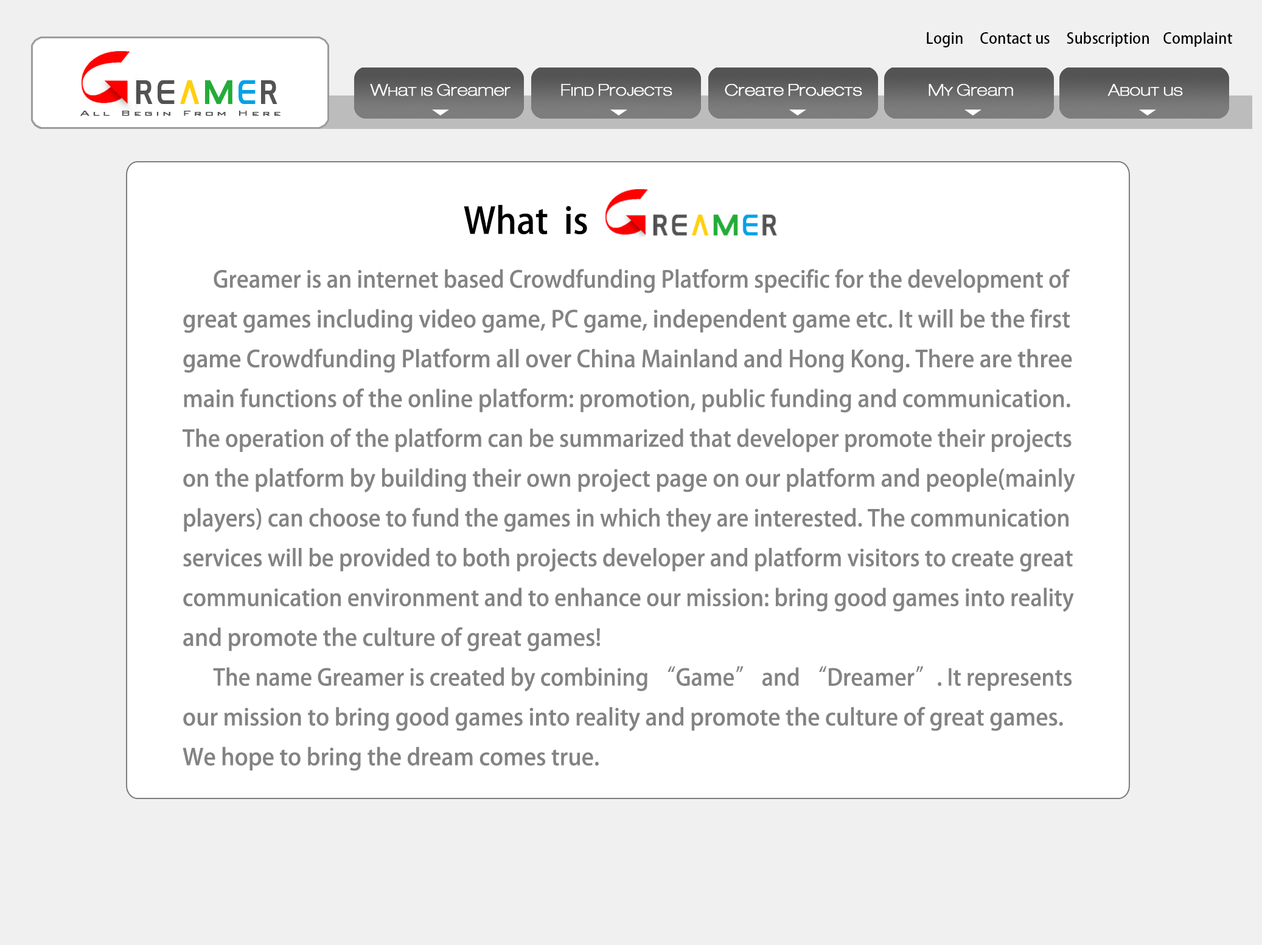
<style>
.page{position:relative;width:1262px;height:945px;background:#ffffff}
.page>*{position:absolute;margin:0}
.t1{font:14.6px "AdobeHeitiStd-Regular";color:#000000}
.t2{font:29.6px "GAMECUBENDualSet";letter-spacing:-0.01em;color:#535353}
.t3{font:29.6px "GAMECUBENDualSet";letter-spacing:-0.01em;color:#ffcf10}
.t4{font:29.6px "GAMECUBENDualSet";letter-spacing:-0.01em;color:#22ac38}
.t5{font:29.6px "GAMECUBENDualSet";letter-spacing:-0.01em;color:#00a1e9}
.t6{font:16.2px "Helvelow";color:#ffffff;font-weight:bold}
.t7{font:9.2px "BankGothicBT-Light";letter-spacing:0.2em;color:#535353;font-weight:bold;scale:1.43 1}
.t8{font:36px "AdobeHeitiStd-Regular";color:#000000}
.t9{font:22.8px "AdobeHeitiStd-Regular";color:#838383}
.t10{font:22.8px "AdobeHeitiStd-Regular";color:#000000}
</style>
<div class="page">
<p class="t1" style="left:926px;top:32px;width:306px;height:15px">Login     Contact us     Subscription    Complaint</p>
<p class="t2" style="left:136px;top:80px;width:141px;height:24px">re<span class="t3">a</span><span class="t4">m</span><span class="t5">e</span>r</p>
<p class="t6" style="left:370px;top:84px;width:140px;height:12px">What is Greamer</p>
<p class="t6" style="left:561px;top:84px;width:111px;height:12px">Find Projects</p>
<p class="t6" style="left:724px;top:84px;width:138px;height:12px">Create Projects</p>
<p class="t6" style="left:928px;top:84px;width:85px;height:12px">My Gream</p>
<p class="t6" style="left:1107px;top:84px;width:75px;height:12px">About us</p>
<p class="t7" style="left:80px;top:111px;width:200px;height:5px">All Begin From Here</p>
<p class="t8" style="left:463px;top:205px;width:124px;height:30px">What  is</p>
<p class="t9" style="left:182px;top:269px;width:893px;height:502px"><span class="t10">      </span>Greamer is an internet based Crowdfunding Platform specific for the development of <br>great games including video game, PC game, independent game etc. It will be the first <br>game Crowdfunding Platform all over China Mainland and Hong Kong. There are three <br>main functions of the online platform: promotion, public funding and communication. <br>The operation of the platform can be summarized that developer promote their projects <br>on the platform by building their own project page on our platform and people(mainly<br>players) can choose to fund the games in which they are interested. The communication <br>services will be provided to both projects developer and platform visitors to create great <br>communication environment and to enhance our mission: bring good games into reality <br>and promote the culture of great games! <br>      The name Greamer is created by combining “Game” and “Dreamer”. It represents <br>our mission to bring good games into reality and promote the culture of great games.<br>We hope to bring the dream comes true.</p>
</div>
